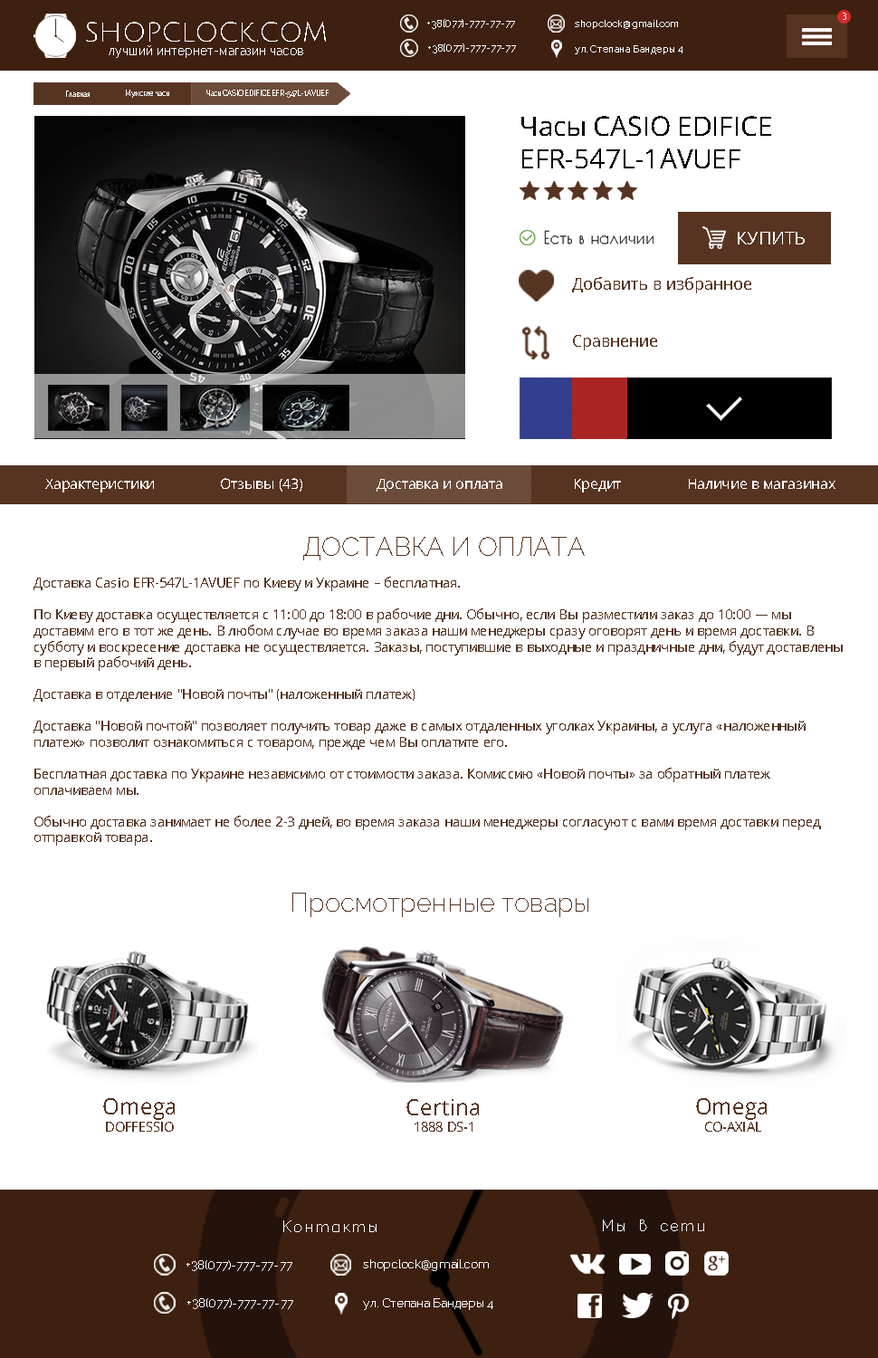
<style>
.page{position:relative;width:878px;height:1358px;background:#ffffff}
.page>*{position:absolute;margin:0}
.t1{font:10px "NirmalaUI";color:#ffffff}
.t2{font:27.2px "JuliusSansOne-Regular";color:#ffffff}
.t3{font:9.9px "Raleway-ExtraLight";color:#ffffff;scale:1.07 1}
.t4{font:10.1px "Raleway-ExtraLight";color:#ffffff}
.t5{font:12.7px "Raleway-ExtraLight";color:#ffffff}
.t6{font:6.8px "Raleway-ExtraLight";color:#ffffff}
.t7{font:26.7px "OpenSans";color:#000000}
.t8{font:17.8px "OpenSans";color:#ffffff}
.t9{font:16.3px "OpenSans";color:#563421}
.t10{font:14.3px "OpenSans";color:#ffffff}
.t11{font:26.5px "Raleway-ExtraLight";color:#563421}
.t12{font:13.2px "OpenSans";color:#563421}
.t13{font:26.6px "Raleway-ExtraLight";color:#563421}
.t14{font:22.2px "OpenSans";color:#563421}
.t15{font:13.3px "OpenSans";color:#563421}
.t16{font:16.3px "Simplex";color:#ffffff}
.t17{font:11.8px "Raleway-ExtraLight";color:#ffffff;scale:1.08 1}
.t18{font:12.1px "Raleway-ExtraLight";color:#ffffff}
</style>
<div class="page">
<p class="t1" style="left:843px;top:13px;width:3px;height:7px">3</p>
<p class="t2" style="left:86px;top:22px;width:240px;height:20px">SHOPCLOCK.COM</p>
<p class="t3" style="left:427px;top:19px;width:88px;height:10px">+38(077)-777-77-77</p>
<p class="t4" style="left:575px;top:20px;width:103px;height:9px">shopclock@gmail.com</p>
<p class="t5" style="left:109px;top:45px;width:194px;height:13px">лучший интернет-магазин часов</p>
<p class="t3" style="left:428px;top:43px;width:88px;height:10px">+38(077)-777-77-77</p>
<p class="t4" style="left:575px;top:45px;width:108px;height:9px">ул. Степана Бандеры 4</p>
<p class="t6" style="left:126px;top:90px;width:43px;height:8px">Мужские часы</p>
<p class="t6" style="left:206px;top:90px;width:123px;height:8px">Часы CASIO EDIFICE EFR-547L-1AVUEF</p>
<p class="t6" style="left:66px;top:91px;width:24px;height:6px">Главная</p>
<p class="t7" style="left:521px;top:116px;width:250px;height:52px">Часы CASIO EDIFICE EFR-547L-1AVUEF</p>
<p class="t8" style="left:738px;top:232px;width:67px;height:12px">КУПИТЬ</p>
<p class="t9" style="left:572px;top:277px;width:179px;height:16px">Добавить в избранное</p>
<p class="t9" style="left:573px;top:335px;width:84px;height:15px">Сравнение</p>
<p class="t10" style="left:45px;top:479px;width:109px;height:13px">Характеристики</p>
<p class="t10" style="left:221px;top:478px;width:81px;height:14px">Отзывы (43)</p>
<p class="t10" style="left:377px;top:479px;width:125px;height:13px">Доставка и оплата</p>
<p class="t10" style="left:575px;top:479px;width:46px;height:13px">Кредит</p>
<p class="t10" style="left:689px;top:479px;width:147px;height:10px">Наличие в магазинах</p>
<p class="t11" style="left:303px;top:537px;width:282px;height:23px">ДОСТАВКА И ОПЛАТА</p>
<p class="t12" style="left:33px;top:577px;width:810px;height:269px">Доставка Casio EFR-547L-1AVUEF по Киеву и Украине – бесплатная.<br><br>По Киеву доставка осуществляется с 11:00 до 18:00 в рабочие дни. Обычно, если Вы разместили заказ до 10:00 — мы доставим его в тот же день. В любом случае во время заказа наши менеджеры сразу оговорят день и время доставки. В субботу и воскресение доставка не осуществляется. Заказы, поступившие в выходные и праздничные дни, будут доставлены в первый рабочий день.<br><br>Доставка в отделение "Новой почты" (наложенный платеж)<br><br>Доставка "Новой почтой" позволяет получить товар даже в самых отдаленных уголках Украины, а услуга «наложенный платеж» позволит ознакомиться с товаром, прежде чем Вы оплатите его.<br><br>Бесплатная доставка по Украине независимо от стоимости заказа. Комиссию «Новой почты» за обратный платеж оплачиваем мы.<br><br>Обычно доставка занимает не более 2-3 дней, во время заказа наши менеджеры согласуют с вами время доставки перед отправкой товара.</p>
<p class="t13" style="left:292px;top:893px;width:296px;height:24px">Просмотренные товары</p>
<p class="t14" style="left:103px;top:1098px;width:72px;height:22px">Omega</p>
<p class="t14" style="left:406px;top:1099px;width:73px;height:16px">Certina</p>
<p class="t14" style="left:696px;top:1098px;width:71px;height:22px">Omega</p>
<p class="t15" style="left:106px;top:1122px;width:68px;height:10px">DOFFESSIO</p>
<p class="t15" style="left:415px;top:1122px;width:58px;height:10px">1888 DS-1</p>
<p class="t15" style="left:705px;top:1122px;width:56px;height:10px">CO-AXIAL</p>
<p class="t16" style="left:283px;top:1220px;width:94px;height:12px">Контакты</p>
<p class="t16" style="left:603px;top:1219px;width:101px;height:12px">Мы в сети</p>
<p class="t17" style="left:186px;top:1260px;width:106px;height:11px">+38(077)-777-77-77</p>
<p class="t18" style="left:363px;top:1259px;width:126px;height:12px">shopclock@gmail.com</p>
<p class="t17" style="left:187px;top:1298px;width:106px;height:11px">+38(077)-777-77-77</p>
<p class="t18" style="left:363px;top:1298px;width:130px;height:12px">ул. Степана Бандеры 4</p>
</div>
